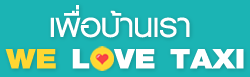
<style>
.page{position:relative;width:250px;height:77px;background:#1bb4b4}
.page>*{position:absolute;margin:0}
.t1{font:47.6px "PSLKittithadaADBold";color:#ffffff}
.t2{font:40.5px "PSLEmpireExtraADBold";color:#ffffff;scale:1.16 1}
.t3{font:40.5px "PSLEmpireExtraADBold";color:#ffd732;scale:1.16 1}
</style>
<div class="page">
<p class="t1" style="left:50px;top:5px;width:140px;height:33px">à¾×èÍºÒ¹àÃÒ</p>
<p class="t2" style="left:5px;top:48px;width:239px;height:21px"><span class="t3">WE </span>LOVE TAXI</p>
</div>
